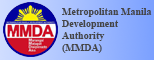
<style>
.page{position:relative;width:154px;height:60px}
.page>*{position:absolute;margin:0}
.t1{font:10px "TimesNewRomanPS-BoldMT";color:#454545}
</style>
<div class="page">
<p class="t1" style="left:61px;top:8px;width:91px;height:45px;text-align:right">Metropolitan Manila<br>Development<br>Authority<br>(MMDA)</p>
</div>
